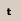
<style>
.page{position:relative;width:21px;height:21px;background:#d9cdc1}
.page>*{position:absolute;margin:0}
.t1{font:9px "Tahoma-Bold";color:#000000}
</style>
<div class="page">
<p class="t1" style="left:7px;top:8px;width:4px;height:7px">t</p>
</div>
